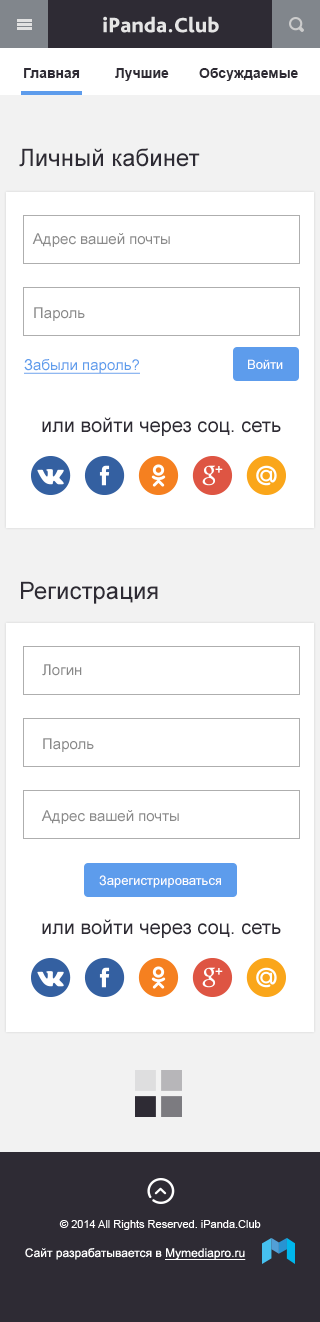
<style>
.page{position:relative;width:320px;height:1322px;background:#ffffff}
.page>*{position:absolute;margin:0}
.t1{font:14px "Arial-BoldMT";color:#2e2b34}
.t2{font:24px "ArialMT";color:#2e2b34}
.t3{font:15px "ArialMT";color:#898989}
.t4{font:15px "ArialMT";color:#5d9cec;text-decoration:underline}
.t5{font:13px "ArialMT";color:#ffffff}
.t6{font:20px "ArialMT";color:#2e2b34}
</style>
<div class="page">
<p class="t1" style="left:24px;top:68px;width:56px;height:10px">Главная</p>
<p class="t1" style="left:115px;top:68px;width:54px;height:13px">Лучшие</p>
<p class="t1" style="left:199px;top:68px;width:99px;height:13px">Обсуждаемые</p>
<p class="t2" style="left:19px;top:148px;width:181px;height:19px">Личный кабинет</p>
<p class="t3" style="left:32px;top:233px;width:138px;height:14px">Адрес вашей почты</p>
<p class="t3" style="left:34px;top:307px;width:51px;height:14px">Пароль</p>
<p class="t4" style="left:24px;top:359px;width:116px;height:15px">Забыли пароль?</p>
<p class="t5" style="left:248px;top:359px;width:35px;height:10px">Войти</p>
<p class="t6" style="left:42px;top:417px;width:239px;height:19px">или войти через соц. сеть</p>
<p class="t2" style="left:21px;top:581px;width:137px;height:23px">Регистрация</p>
<p class="t3" style="left:42px;top:664px;width:40px;height:12px">Логин</p>
<p class="t3" style="left:43px;top:738px;width:51px;height:14px">Пароль</p>
<p class="t3" style="left:41px;top:810px;width:138px;height:14px">Адрес вашей почты</p>
<p class="t5" style="left:99px;top:875px;width:122px;height:13px">Зарегистрироваться</p>
<p class="t6" style="left:42px;top:919px;width:239px;height:19px">или войти через соц. сеть</p>
</div>
